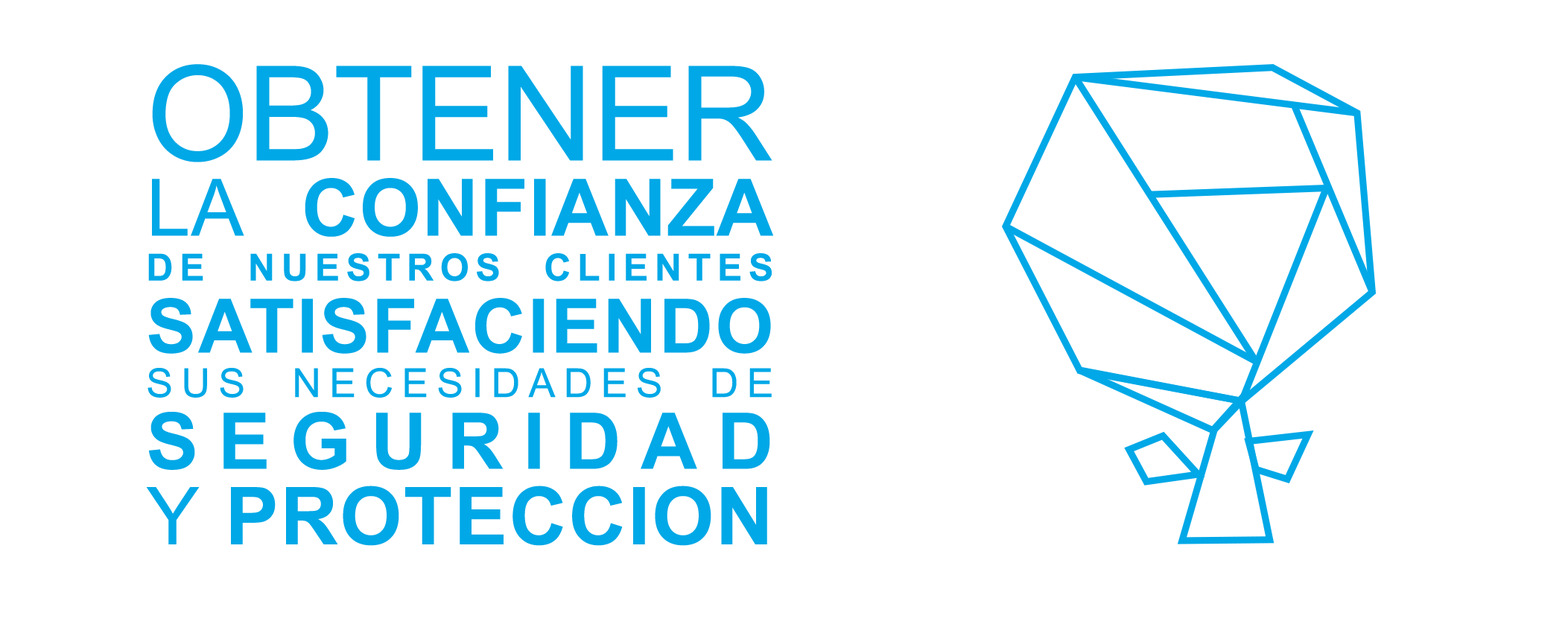
<style>
.page{position:relative;width:1568px;height:633px;background:#ffffff}
.page>*{position:absolute;margin:0}
.t1{font:37.4px "Arial-BoldMT";letter-spacing:0.17em;color:#00a8e7}
.t2{font:131.8px "ArialMT";letter-spacing:-0.05em;color:#00a8e7}
.t3{font:79.1px "ArialMT";letter-spacing:0.01em;color:#00a8e7}
.t4{font:79.1px "Arial-BoldMT";letter-spacing:0.01em;color:#00a8e7}
.t5{font:74.8px "Arial-BoldMT";letter-spacing:-0.01em;color:#00a8e7}
.t6{font:40px "ArialMT";letter-spacing:0.21em;color:#00a8e7}
.t7{font:78.2px "Arial-BoldMT";letter-spacing:0.21em;color:#00a8e7}
.t8{font:79.9px "ArialMT";letter-spacing:0.021em;color:#00a8e7}
.t9{font:79.9px "Arial-BoldMT";letter-spacing:0.021em;color:#00a8e7}
.t10{font:27.5px "Arial-BoldMT";letter-spacing:-0.05em;color:#00a8e7}
</style>
<div class="page">
<p class="t1" style="left:146px;top:64px;width:627px;height:482px;text-align:justify"><span class="t2">OBTENER <br></span><span class="t3">LA</span><span class="t4"> CONFIANZA <br></span>DE NUESTROS CLIENTES <br><span class="t5">SATISFACIENDO <br></span><span class="t6">SUS NECESIDADES DE<br></span><span class="t7">SEGURIDAD<br></span><span class="t8">Y</span><span class="t9"> PROTECCION<br></span><span class="t10">.</span></p>
</div>
